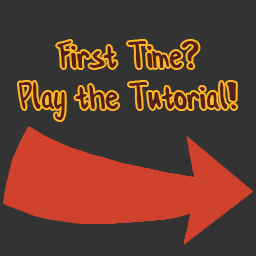
<style>
.page{position:relative;width:256px;height:256px;background:#333333}
.page>*{position:absolute;margin:0}
.t1{font:34.3px "ConformityNormal";color:#52221a}
</style>
<div class="page">
<p class="t1" style="left:19px;top:41px;width:218px;height:79px;text-align:center">First Time?<br>Play the Tutorial!</p>
</div>
